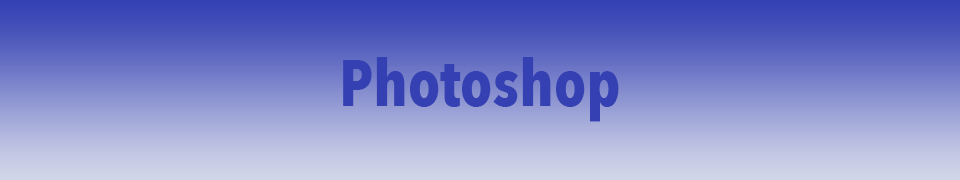
<style>
.page{position:relative;width:960px;height:180px}
.page>*{position:absolute;margin:0}
.t1{font:65px "AvenirNextCondensed-Bold";color:#3541b3}
</style>
<div class="page">
<p class="t1" style="left:343px;top:57px;width:276px;height:65px">Photoshop</p>
</div>
